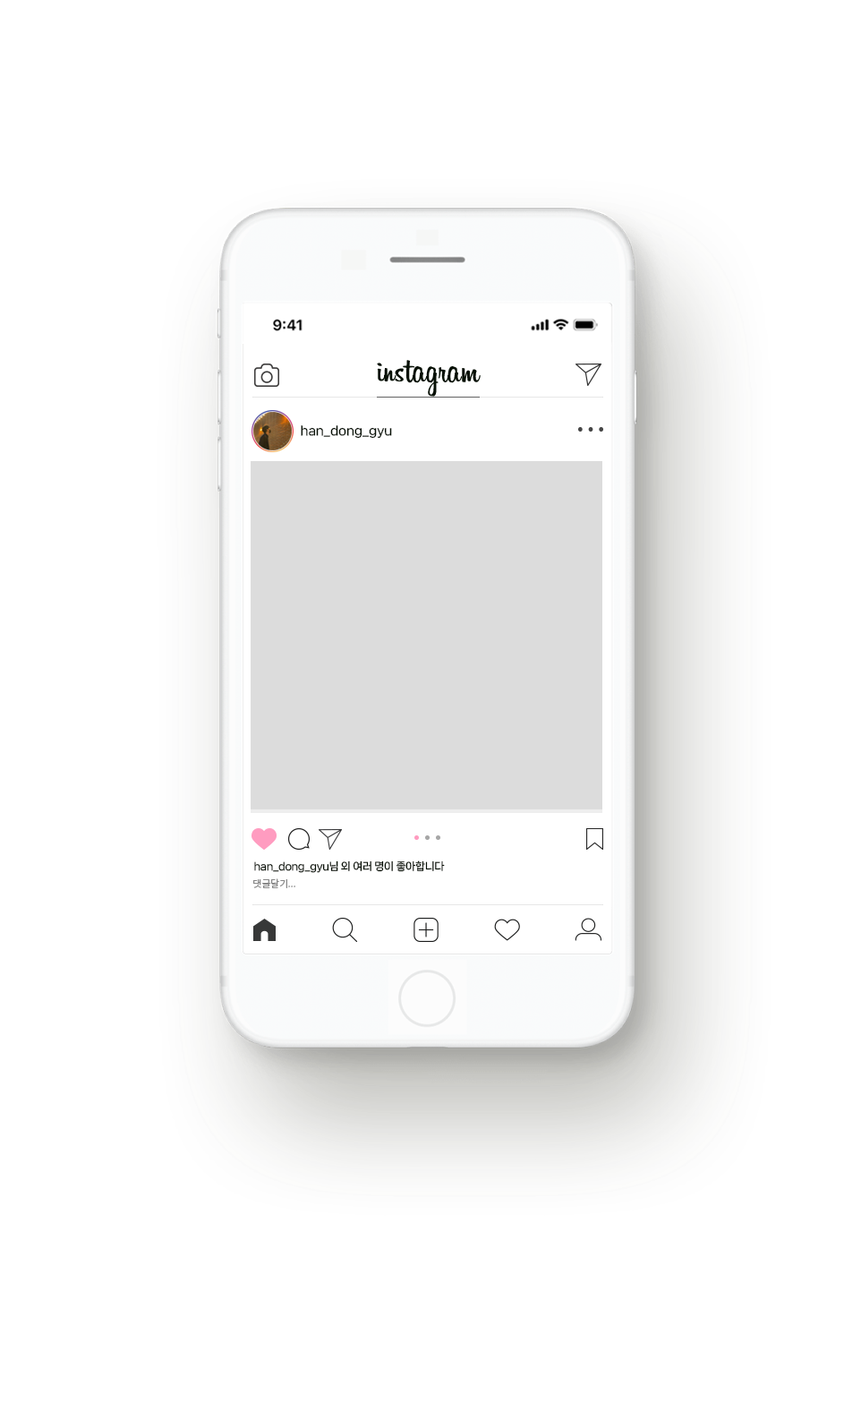
<style>
.page{position:relative;width:844px;height:1412px;background:#ffffff}
.page>*{position:absolute;margin:0}
.t1{font:12.4px "NanumSquareNeoTTF-cBd";letter-spacing:-0.01em;color:#071005}
.t2{font:10.4px "NanumSquareNeoTTF-cBd";letter-spacing:-0.025em;color:#071005}
.t3{font:9.7px "NotoSansCJKkr-DemiLight";letter-spacing:-0.01em;color:#888888}
</style>
<div class="page">
<p class="t1" style="left:301px;top:425px;width:91px;height:14px">han_dong_gyu</p>
<p class="t2" style="left:254px;top:861px;width:191px;height:12px">han_dong_gyu님 외 여러 명이 좋아합니다</p>
<p class="t3" style="left:253px;top:878px;width:43px;height:10px">댓글달기...</p>
</div>
